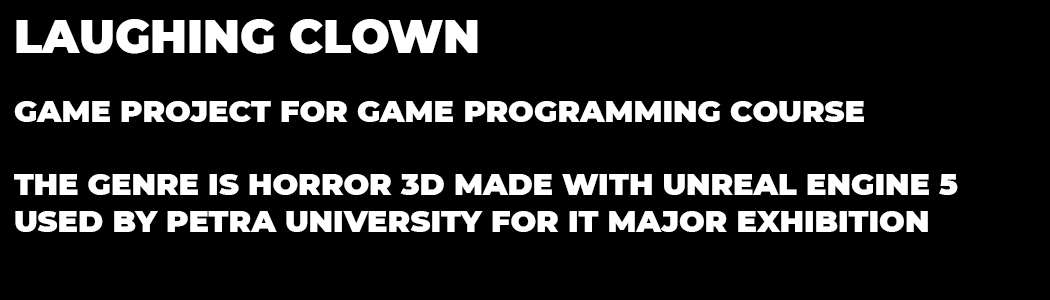
<style>
.page{position:relative;width:1050px;height:300px;background:#000000}
.page>*{position:absolute;margin:0}
.t1{font:45.8px "Montserrat-Black";color:#ffffff}
.t2{font:30.4px "Montserrat-Black";color:#ffffff}
</style>
<div class="page">
<p class="t1" style="left:16px;top:19px;width:462px;height:35px">LAUGHING CLOWN</p>
<p class="t2" style="left:14px;top:101px;width:944px;height:131px">GAME PROJECT FOR GAME PROGRAMMING COURSE<br><br>THE GENRE IS HORROR 3D MADE WITH UNREAL ENGINE 5<br>USED BY PETRA UNIVERSITY FOR IT MAJOR EXHIBITION</p>
</div>
